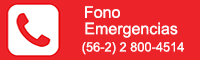
<style>
.page{position:relative;width:200px;height:60px;background:#ec2329}
.page>*{position:absolute;margin:0}
.t1{font:16.1px "ArialMT";color:#ffffff}
.t2{font:12.8px "ArialMT";color:#ffffff}
</style>
<div class="page">
<p class="t1" style="left:85px;top:6px;width:35px;height:12px">Fono</p>
<p class="t1" style="left:85px;top:22px;width:93px;height:16px">Emergencias</p>
<p class="t2" style="left:82px;top:42px;width:102px;height:13px">(56-2) 2 800-4514</p>
</div>
